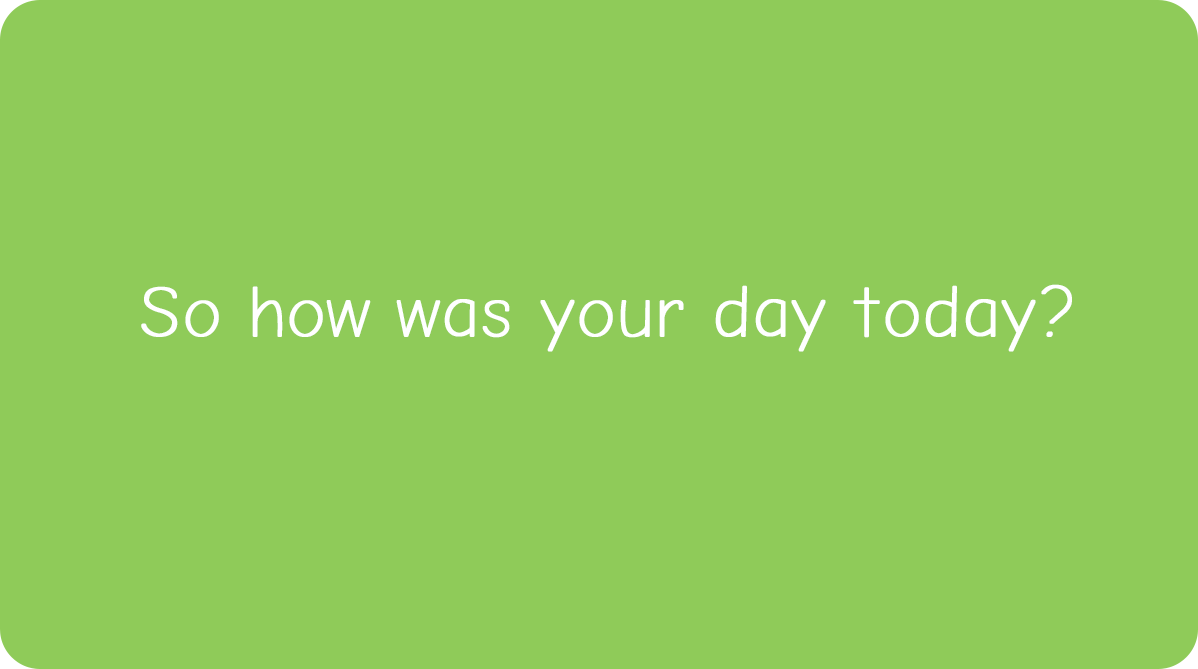
<style>
.page{position:relative;width:1198px;height:669px;background:#8fcb59}
.page>*{position:absolute;margin:0}
.t1{font:72px "ComicNeue-Light";color:#ffffff;font-weight:bold}
</style>
<div class="page">
<p class="t1" style="left:141px;top:284px;width:931px;height:68px">So how was your day today?</p>
</div>
